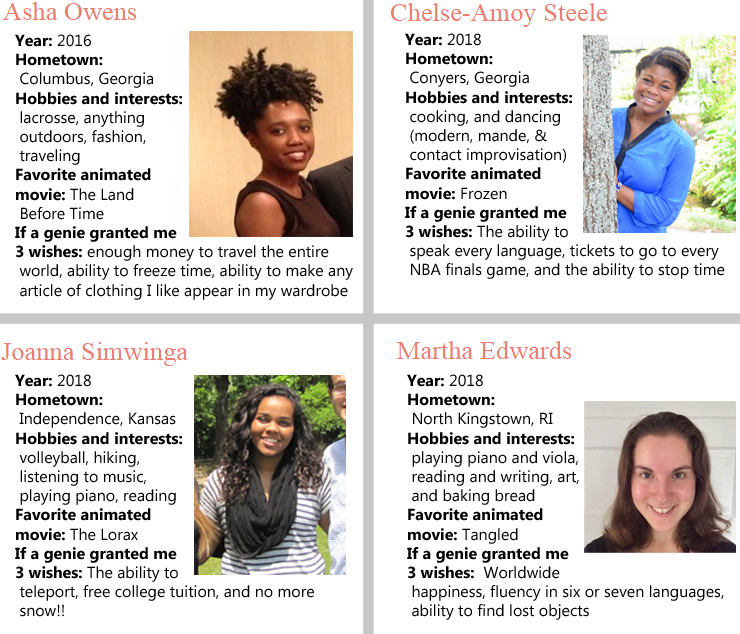
<style>
.page{position:relative;width:740px;height:634px;background:#ffffff}
.page>*{position:absolute;margin:0}
.t1{font:16px "MicrosoftPhagsPa";color:#000000}
.t2{font:16px "MicrosoftPhagsPa-Bold";color:#000000}
</style>
<div class="page">
<p class="t1" style="left:15px;top:34px;width:338px;height:266px"><span class="t2">Year:</span> 2016 <br><span class="t2">Hometown: <br></span> Columbus, Georgia<br><span class="t2">Hobbies and interests:<br></span> lacrosse, anything <br> outdoors, fashion, <br> traveling <br><span class="t2">Favorite animated <br>movie: </span>The Land <br> Before Time<br><span class="t2">If a genie granted me <br>3 wishes: </span>enough money to travel the entire <br> world, ability to freeze time, ability to make any <br> article of clothing I like appear in my wardrobe</p>
<p class="t1" style="left:405px;top:33px;width:320px;height:246px"><span class="t2">Year: </span>2018 <br><span class="t2">Hometown: <br> </span>Conyers, Georgia<br><span class="t2">Hobbies and interests:<br> </span>cooking, and dancing <br> (modern, mande, &amp; <br> contact improvisation) <br><span class="t2">Favorite animated <br>movie: </span>Frozen<br><span class="t2">If a genie granted me <br>3 wishes: </span>The ability to <br> speak every language, tickets to go to every <br> NBA finals game, and the ability to stop time</p>
<p class="t1" style="left:15px;top:374px;width:299px;height:243px"><span class="t2">Year: </span>2018 <br><span class="t2">Hometown: <br></span> Independence, Kansas<br><span class="t2">Hobbies and interests:<br></span> volleyball, hiking, <br> listening to music, <br> playing piano, reading <br><span class="t2">Favorite animated <br>movie: </span>The Lorax<br><span class="t2">If a genie granted me <br>3 wishes: </span>The ability to <br> teleport, free college tuition, and no more <br> snow!!</p>
<p class="t1" style="left:407px;top:374px;width:317px;height:246px"><span class="t2">Year: </span>2018 <br><span class="t2">Hometown: <br></span> North Kingstown, RI<br><span class="t2">Hobbies and interests:<br></span> playing piano and viola,<br> reading and writing, art,<br> and baking bread<br><span class="t2">Favorite animated <br>movie: </span>Tangled<br><span class="t2">If a genie granted me <br>3 wishes:  </span>Worldwide <br> happiness, fluency in six or seven languages,<br> ability to find lost objects</p>
</div>
